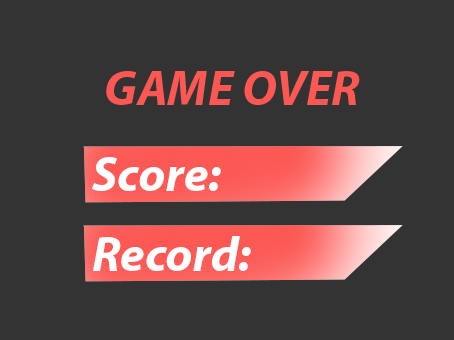
<style>
.page{position:relative;width:454px;height:340px;background:#333333}
.page>*{position:absolute;margin:0}
.t1{font:49px "MyriadPro-BoldIt";color:#fc5753}
.t2{font:49px "MyriadPro-BoldIt";color:#ffffff}
</style>
<div class="page">
<p class="t1" style="left:106px;top:71px;width:254px;height:34px">GAME OVER</p>
<p class="t2" style="left:92px;top:157px;width:129px;height:34px">Score:</p>
<p class="t2" style="left:93px;top:236px;width:158px;height:35px">Record:</p>
</div>
